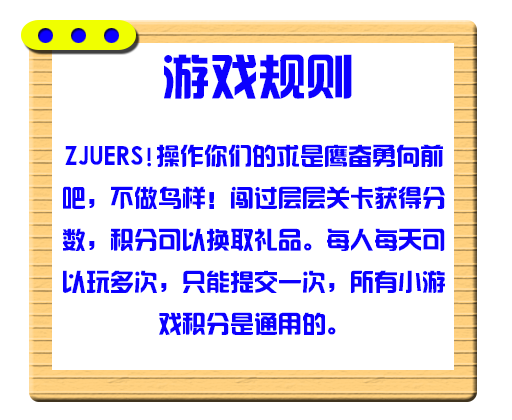
<style>
.page{position:relative;width:512px;height:420px;background:#ffffff}
.page>*{position:absolute;margin:0}
.t1{font:48px "¹ã½Ý¾ÓÃÔÄã×Ö¿â";color:#0c00ff}
.t2{font:24px "¹ã½Ý¾ÓÃÔÄã×Ö¿â";color:#0c00ff}
</style>
<div class="page">
<p class="t1" style="left:164px;top:54px;width:188px;height:45px">游戏规则</p>
<p class="t2" style="left:63px;top:144px;width:382px;height:191px;text-align:center">ZJUERS!操作你们的求是鹰奋勇向前<br>吧，不做鸟样！闯过层层关卡获得分<br>数，积分可以换取礼品。每人每天可<br>以玩多次，只能提交一次，所有小游<br>戏积分是通用的。</p>
</div>
